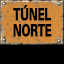
<style>
.page{position:relative;width:64px;height:64px;background:#000000}
.page>*{position:absolute;margin:0}
.t1{font:12px/16.7px "UniversNextPro-Bold";letter-spacing:-0.04em;color:#000000;text-transform:uppercase;font-weight:bold;scale:0.7 1}
</style>
<div class="page">
<p class="t1" style="left:13px;top:5px;width:39px;height:32px;text-align:center">túnel<br>norte</p>
</div>
